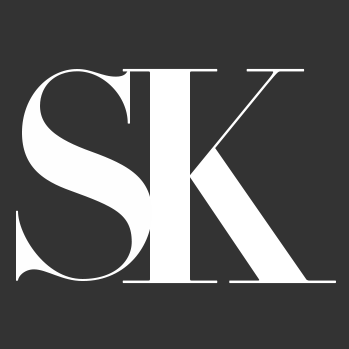
<style>
.page{position:relative;width:349px;height:349px;background:#333333}
.page>*{position:absolute;margin:0}
.t1{font:285px "HTFDidot-B42Bold";color:#fefefe}
.t2{font:302.2px "HTFDidot-B42Bold";color:#ffffff;scale:0.95 1}
</style>
<div class="page">
<p class="t1" style="left:16px;top:69px;width:136px;height:212px">S</p>
<p class="t2" style="left:122px;top:68px;width:215px;height:216px">K</p>
</div>
